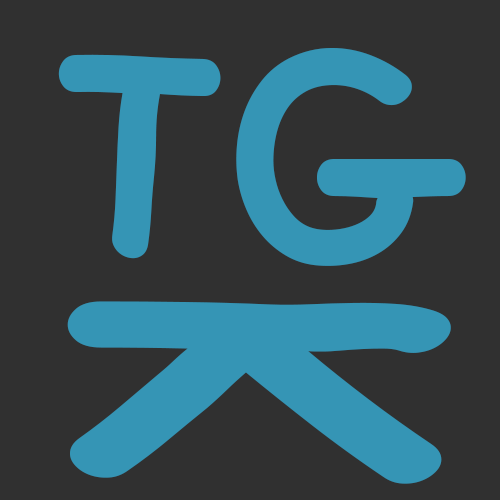
<style>
.page{position:relative;width:500px;height:500px;background:#303030}
.page>*{position:absolute;margin:0}
.t1{font:298.6px "MVcrookerRegular";color:#3595b5}
.t2{font:554.9px "MVcrookerRegular";color:#3595b5;scale:0.67 1}
</style>
<div class="page">
<p class="t1" style="left:58px;top:54px;width:163px;height:205px">T</p>
<p class="t1" style="left:236px;top:48px;width:230px;height:218px">G</p>
<p class="t2" style="left:67px;top:301px;width:384px;height:183px;rotate:90deg">K</p>
</div>
